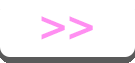
<style>
.page{position:relative;width:135px;height:63px;background:#ffffff}
.page>*{position:absolute;margin:0}
.t1{font:42.7px "ForteMT";color:#ff8ff1}
</style>
<div class="page">
<p class="t1" style="left:41px;top:16px;width:52px;height:24px">&gt;&gt;</p>
</div>
